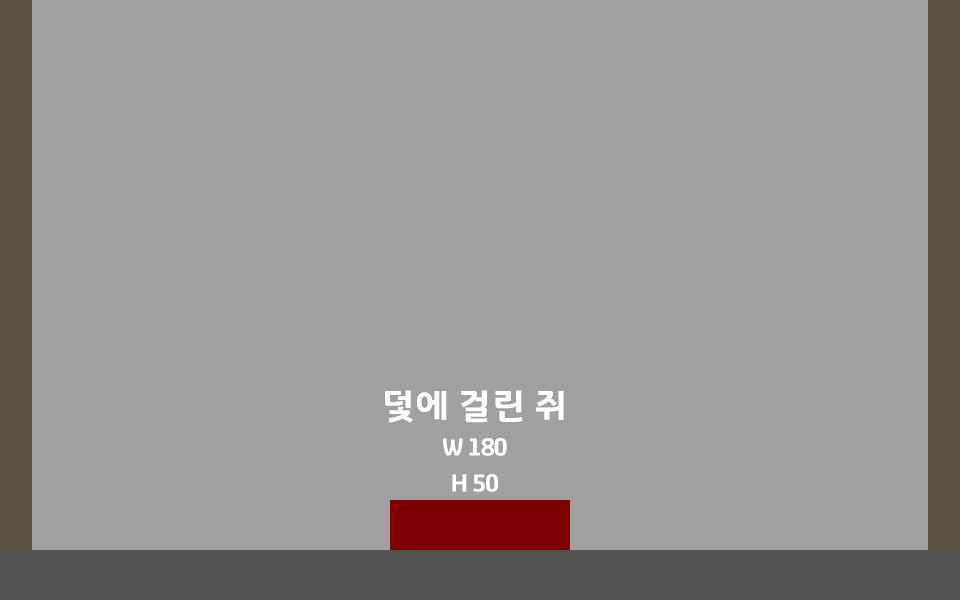
<style>
.page{position:relative;width:960px;height:600px;background:#a0a0a0}
.page>*{position:absolute;margin:0}
.t1{font:24px/36px "GyeonggiTitleV";letter-spacing:-0.05em;color:#ffffff}
.t2{font:36px/12px "GyeonggiTitleV";letter-spacing:-0.05em;color:#ffffff}
</style>
<div class="page">
<p class="t1" style="left:385px;top:390px;width:179px;height:102px;text-align:center"><span class="t2">덫에 걸린 쥐<br><br><br><br></span>W 180<br>H 50</p>
</div>
